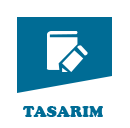
<style>
.page{position:relative;width:130px;height:128px;background:#ffffff}
.page>*{position:absolute;margin:0}
.t1{font:16px "CooperBlack";color:#006c95}
</style>
<div class="page">
<p class="t1" style="left:23px;top:106px;width:80px;height:11px">TASARIM</p>
</div>
